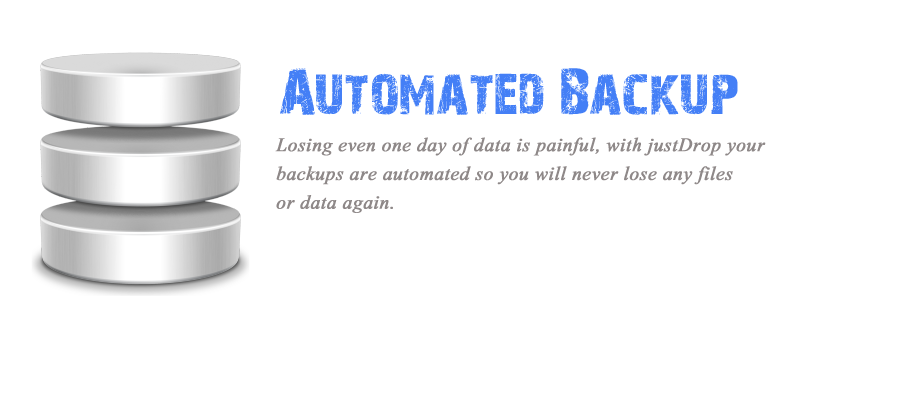
<style>
.page{position:relative;width:900px;height:420px;background:#ffffff}
.page>*{position:absolute;margin:0}
.t1{font:60px "28DaysLater";color:#447ff6}
.t2{font:24px "Aparajita-Italic";color:#8e8888;font-weight:bold}
</style>
<div class="page">
<p class="t1" style="left:280px;top:68px;width:458px;height:47px">Automated Backup</p>
<p class="t2" style="left:275px;top:137px;width:491px;height:76px">Losing even one day of data is painful, with justDrop your <br>backups are automated so you will never lose any files <br>or data again.</p>
</div>
